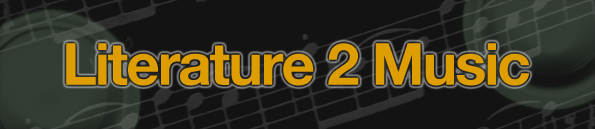
<style>
.page{position:relative;width:595px;height:129px;background:#131313}
.page>*{position:absolute;margin:0}
.t1{font:58.3px "HelveticaNeue-Bold";letter-spacing:-0.035em;color:#de9d00}
</style>
<div class="page">
<p class="t1" style="left:66px;top:43px;width:464px;height:43px">Literature 2 Music</p>
</div>
